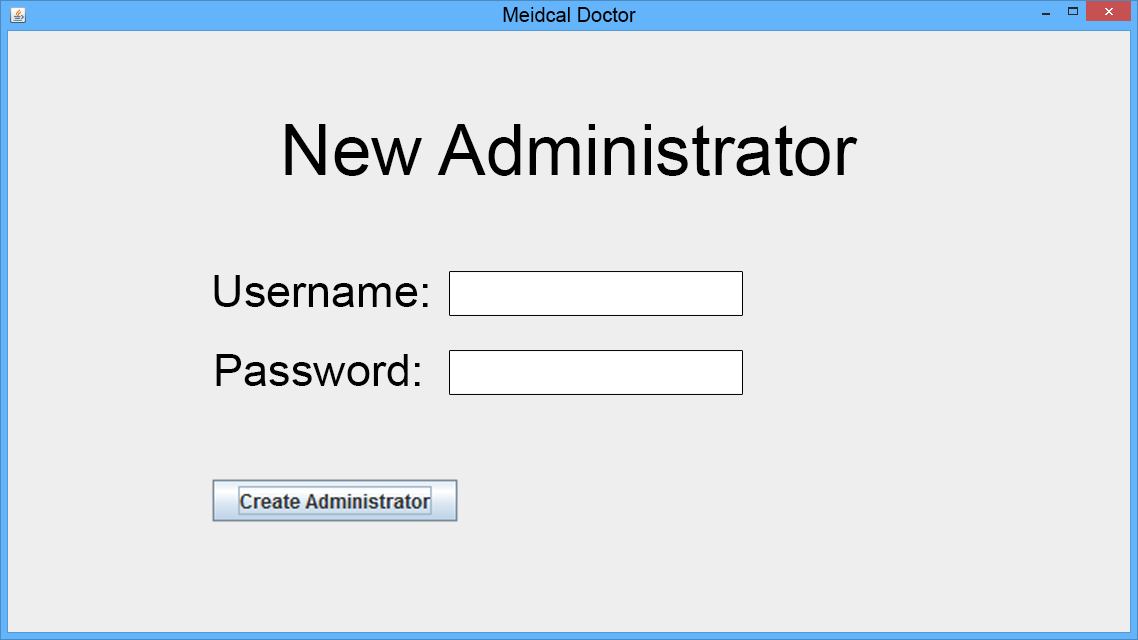
<style>
.page{position:relative;width:1138px;height:640px;background:#eeeeee}
.page>*{position:absolute;margin:0}
.t1{font:20px "ArialMT";color:#000000}
.t2{font:71px "ArialMT";color:#000000}
.t3{font:45px "ArialMT";color:#000000}
</style>
<div class="page">
<p class="t1" style="left:503px;top:7px;width:133px;height:15px">Meidcal Doctor</p>
<p class="t2" style="left:285px;top:124px;width:573px;height:52px">New Administrator</p>
<p class="t3" style="left:214px;top:275px;width:214px;height:32px">Username:</p>
<p class="t3" style="left:216px;top:354px;width:204px;height:32px">Password:</p>
</div>
